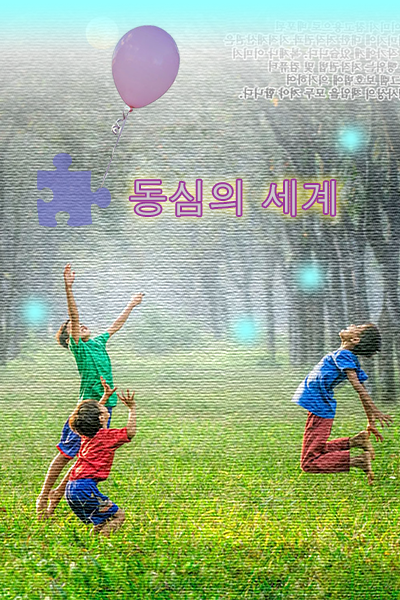
<style>
.page{position:relative;width:400px;height:600px}
.page>*{position:absolute;margin:0}
.t1{font:40px "Dotum";color:#cccccc}
</style>
<div class="page">
<p class="t1" style="left:130px;top:180px;width:205px;height:36px">동심의 세계</p>
</div>
